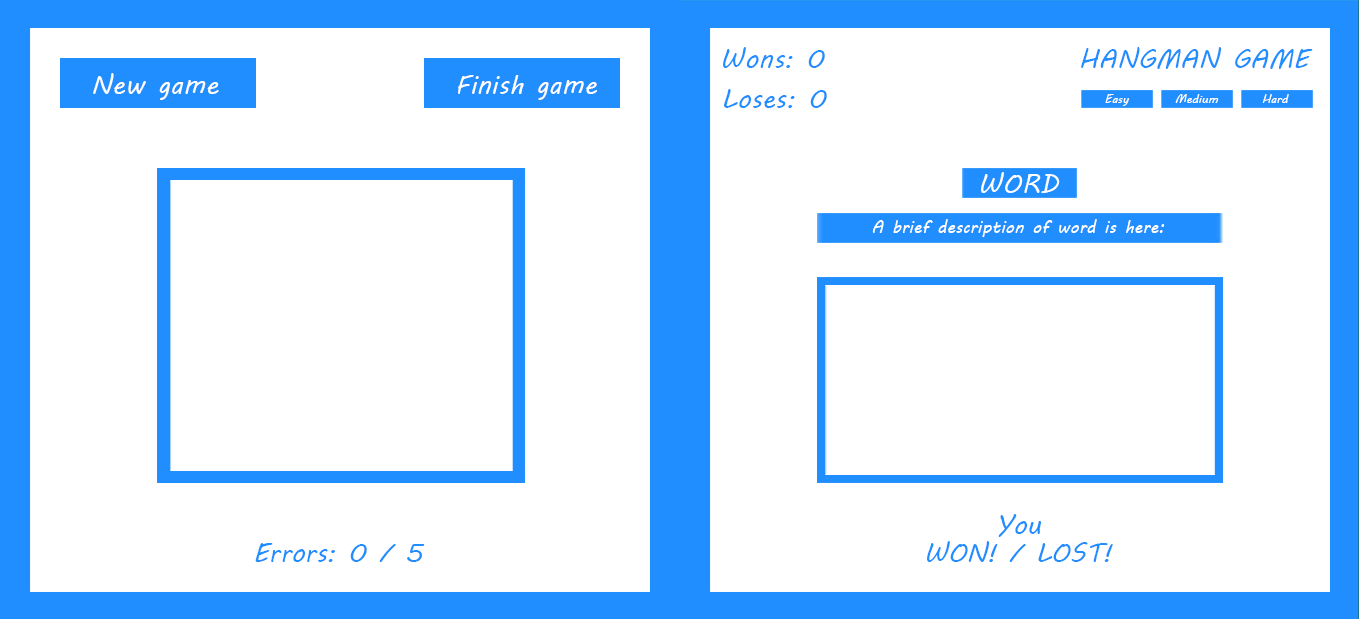
<style>
.page{position:relative;width:1359px;height:619px;background:#ffffff}
.page>*{position:absolute;margin:0}
.t1{font:26.4px "MVBoli";color:#208efe}
.t2{font:26.4px "MVBoli";color:#ffffff}
.t3{font:11.8px "MVBoli";color:#ffffff}
.t4{font:27.3px "MVBoli";color:#ffffff;scale:0.97 1}
.t5{font:18px "MVBoli";color:#ffffff;scale:0.97 1}
.t6{font:26px "MVBoli";color:#208efe}
</style>
<div class="page">
<p class="t1" style="left:723px;top:47px;width:102px;height:21px">Wons: 0</p>
<p class="t1" style="left:1081px;top:47px;width:232px;height:22px">HANGMAN GAME</p>
<p class="t2" style="left:93px;top:73px;width:126px;height:27px">New game</p>
<p class="t2" style="left:458px;top:75px;width:139px;height:25px">Finish game</p>
<p class="t1" style="left:724px;top:89px;width:103px;height:19px">Loses: 0</p>
<p class="t3" style="left:1105px;top:94px;width:24px;height:12px">Easy</p>
<p class="t3" style="left:1175px;top:94px;width:44px;height:9px">Medium</p>
<p class="t3" style="left:1262px;top:94px;width:27px;height:9px">Hard</p>
<p class="t4" style="left:981px;top:172px;width:79px;height:21px">WORD</p>
<p class="t5" style="left:872px;top:219px;width:293px;height:18px">A brief description of word is here:</p>
<p class="t6" style="left:998px;top:514px;width:43px;height:23px">You</p>
<p class="t6" style="left:255px;top:543px;width:170px;height:19px">Errors: 0 / 5</p>
<p class="t6" style="left:927px;top:541px;width:186px;height:21px">WON! / LOST!</p>
</div>
